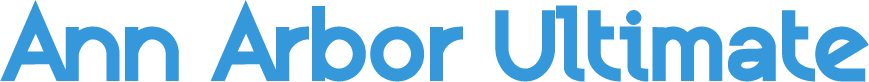
<style>
.page{position:relative;width:869px;height:82px;background:#ffffff}
.page>*{position:absolute;margin:0}
.t1{font:84px "Kerater-Black";letter-spacing:0.04em;color:#3498db}
</style>
<div class="page">
<p class="t1" style="left:0px;top:0px;width:869px;height:82px">Ann Arbor Ultimate</p>
</div>
